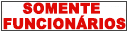
<style>
.page{position:relative;width:128px;height:32px;background:#ffffff}
.page>*{position:absolute;margin:0}
.t1{font:14.7px/15.3px "Arial-Black";color:#df0905;font-weight:bold;scale:0.93 1}
</style>
<div class="page">
<p class="t1" style="left:3px;top:2px;width:123px;height:28px">SOMENTE<br>FUNCIONÁRIOS</p>
</div>
